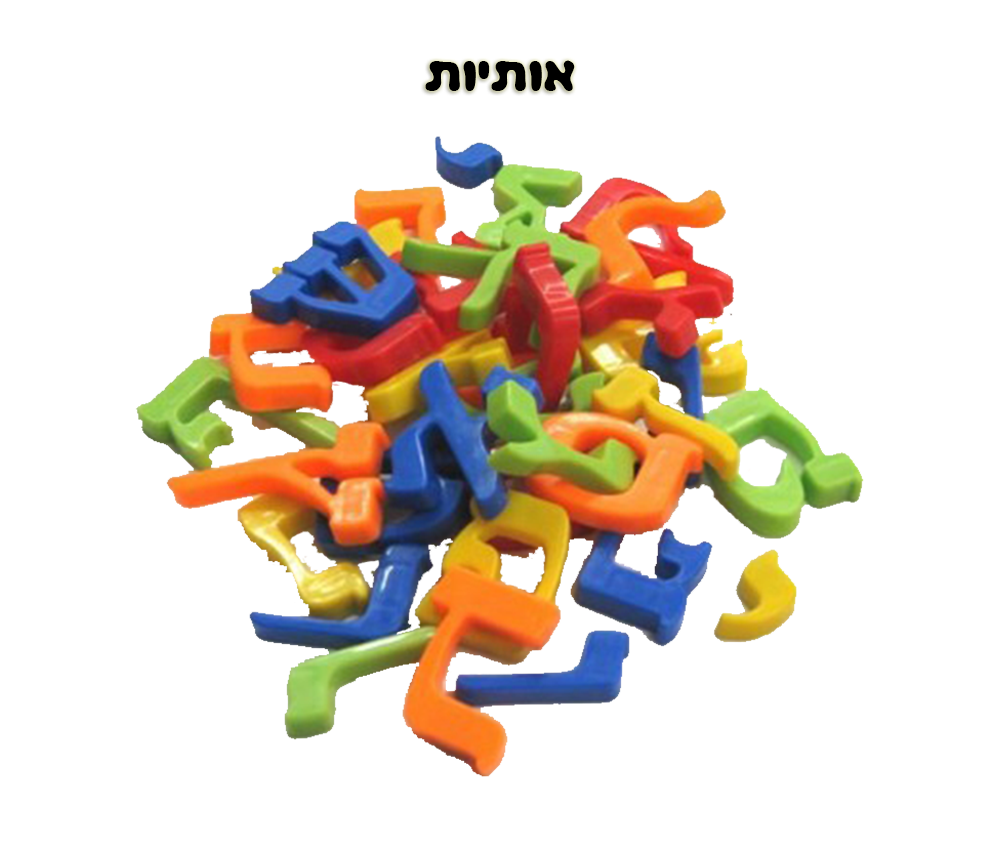
<style>
.page{position:relative;width:1000px;height:841px;background:#ffffff}
.page>*{position:absolute;margin:0}
.t1{font:48.2px "GanCLM-Bold";color:#000000}
</style>
<div class="page">
<p class="t1" style="left:425px;top:60px;width:150px;height:31px">תויתוא</p>
</div>
